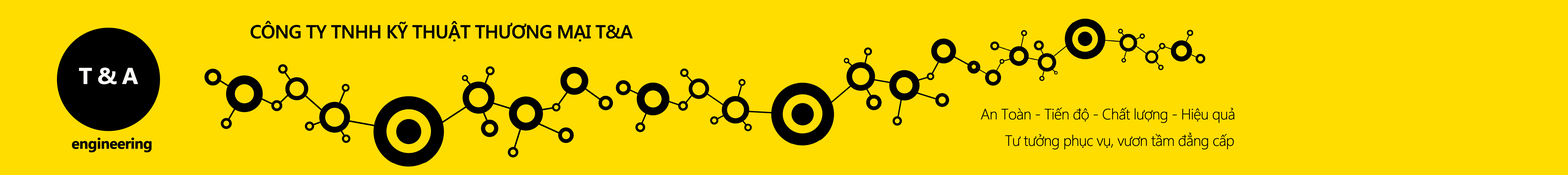
<style>
.page{position:relative;width:1568px;height:175px;background:#ffdd00}
.page>*{position:absolute;margin:0}
.t1{font:18.7px "SegoeUI-SemiBold";letter-spacing:-0.05em;color:#000000;font-weight:bold}
.t2{font:15px "SegoeUI-Light";letter-spacing:-0.05em;color:#000000;font-weight:bold}
</style>
<div class="page">
<p class="t1" style="left:250px;top:21px;width:383px;height:21px">CÔNG TY TNHH KỸ THUẬT THƯƠNG MẠI T&amp;A</p>
<p class="t2" style="left:981px;top:107px;width:253px;height:16px">An Toàn - Tiến độ - Chất lượng - Hiệu quả</p>
<p class="t2" style="left:1005px;top:132px;width:229px;height:17px">Tư tưởng phục vụ, vươn tầm đẳng cấp</p>
</div>
